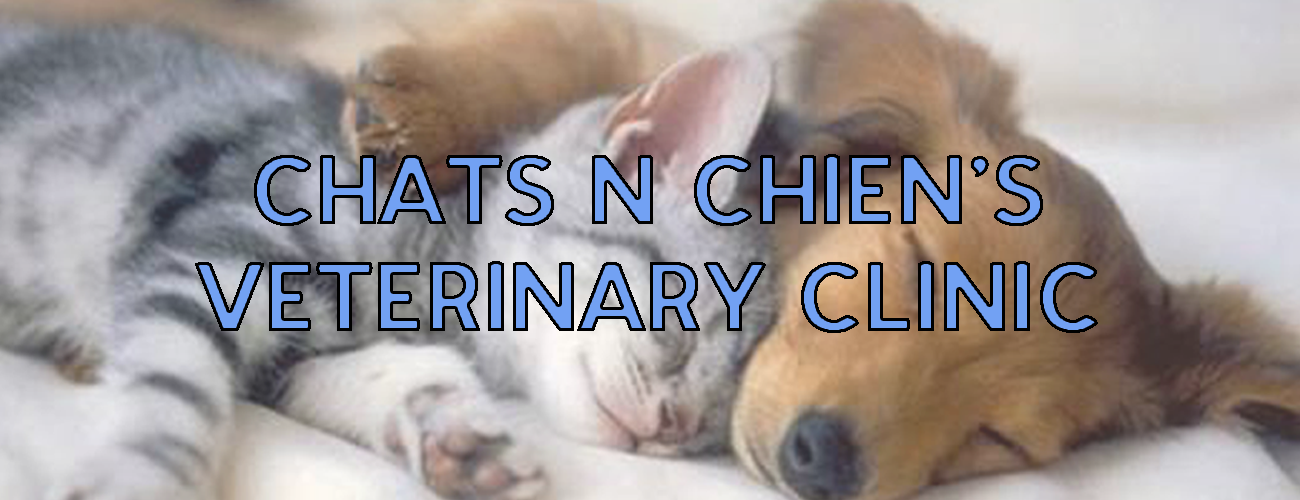
<style>
.page{position:relative;width:1300px;height:500px}
.page>*{position:absolute;margin:0}
.t1{font:23.5px/107.1px "PatagonianTitles";letter-spacing:-0.01em;font-weight:bold}
</style>
<div class="page">
<p class="t1" style="left:195px;top:154px;width:903px;height:179px;text-align:center">CHATS N CHIEN’S <br>VETERINARY CLINIC</p>
</div>
